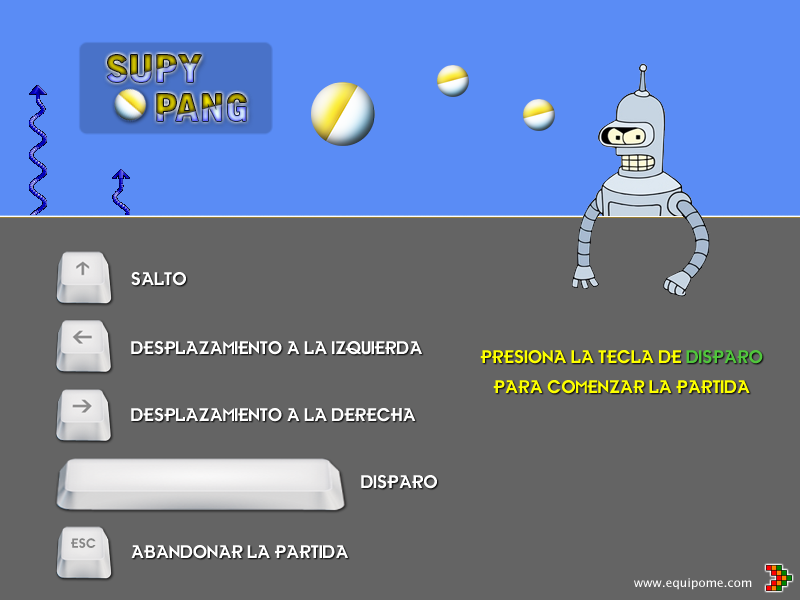
<style>
.page{position:relative;width:800px;height:600px;background:#646464}
.page>*{position:absolute;margin:0}
.t1{font:36px "BellGothicStd-Black"}
.t2{font:18px "Futurama";color:#fefefe}
.t3{font:18px/10px "Futurama";color:#fcff00}
.t4{font:18px/10px "Futurama";color:#50c53c}
.t5{font:13px "Futurama";color:#868686}
.t6{font:12px "LucidaSansUnicode";color:#fefefe}
</style>
<div class="page">
<p class="t1" style="left:107px;top:55px;width:94px;height:27px">SUPY</p>
<p class="t1" style="left:157px;top:94px;width:89px;height:27px">PANG</p>
<p class="t2" style="left:131px;top:272px;width:55px;height:14px">SALTO</p>
<p class="t2" style="left:131px;top:341px;width:291px;height:14px">DESPLAZAMIENTO A LA IZQUIERDA</p>
<p class="t3" style="left:480px;top:350px;width:283px;height:44px;text-align:center">PRESIONA LA TECLA DE <span class="t4">DISPARO<br></span>PARA COMENZAR LA PARTIDA</p>
<p class="t2" style="left:131px;top:408px;width:285px;height:14px">DESPLAZAMIENTO A LA DERECHA</p>
<p class="t2" style="left:361px;top:475px;width:76px;height:14px">DISPARO</p>
<p class="t5" style="left:71px;top:538px;width:25px;height:10px">ESC</p>
<p class="t2" style="left:131px;top:545px;width:217px;height:14px">ABANDONAR LA PARTIDA</p>
<p class="t6" style="left:634px;top:578px;width:118px;height:12px">www.equipome.com</p>
</div>
